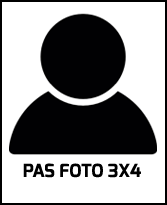
<style>
.page{position:relative;width:167px;height:205px;background:#ffffff}
.page>*{position:absolute;margin:0}
.t1{font:18px "Exo-Bold";color:#000000}
</style>
<div class="page">
<p class="t1" style="left:23px;top:163px;width:118px;height:15px">PAS FOTO 3X4</p>
</div>
